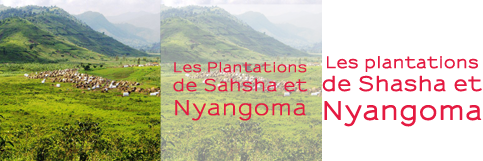
<style>
.page{position:relative;width:483px;height:161px;background:#ffffff}
.page>*{position:absolute;margin:0}
.t1{font:15px "Sansumi-Bold";letter-spacing:0.06em;color:#e41a41;font-weight:bold}
.t2{font:19px "Sansumi-Bold";letter-spacing:0.06em;color:#e41a41;font-weight:bold}
.t3{font:24px "Sansumi-Bold";letter-spacing:0.06em;color:#e41a41;font-weight:bold}
</style>
<div class="page">
<p class="t1" style="left:322px;top:56px;width:160px;height:71px;text-align:center">Les plantations<br><span class="t2">de Shasha et<br></span><span class="t3">Nyangoma</span></p>
</div>
